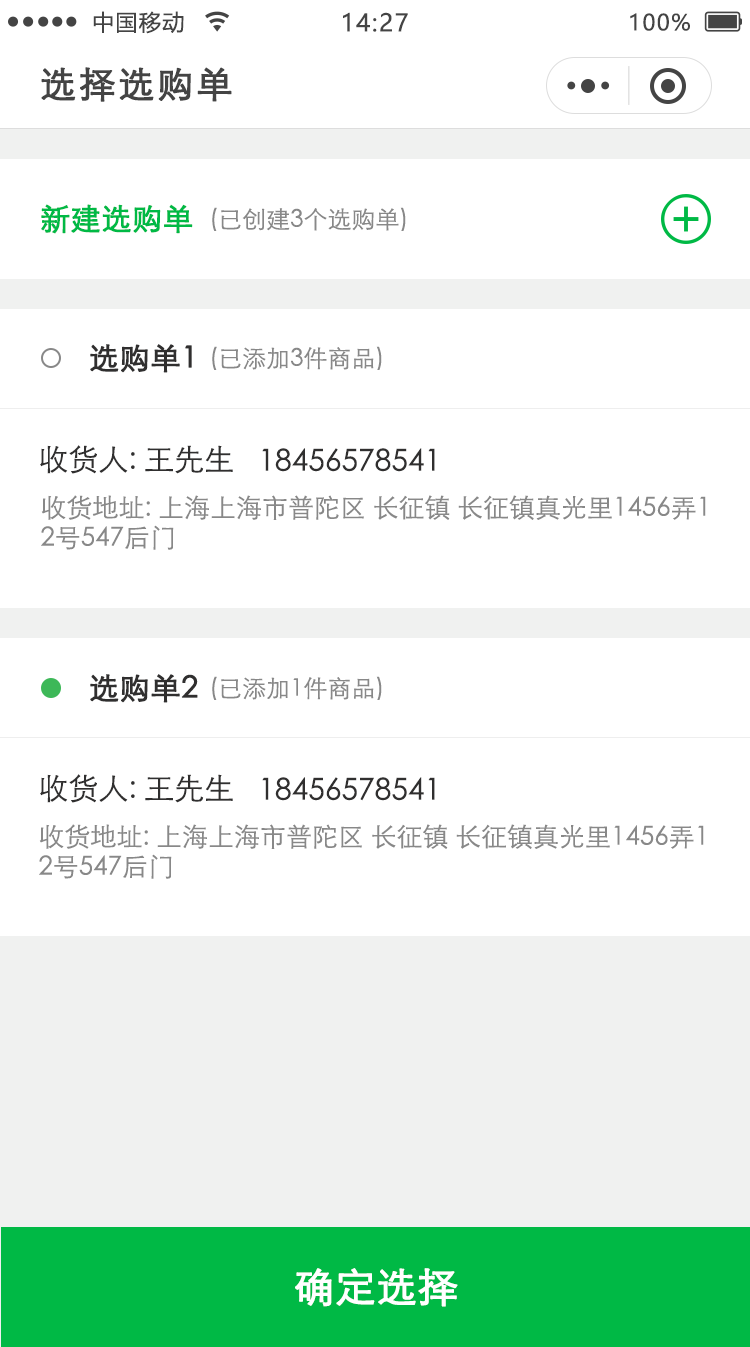
<style>
.page{position:relative;width:750px;height:1347px;background:#ffffff}
.page>*{position:absolute;margin:0}
.t1{font:22px "MicrosoftYaHei";letter-spacing:0.06em;color:#444444}
.t2{font:24px "MicrosoftYaHei";letter-spacing:0.06em;color:#444444}
.t3{font:36px "STXihei";letter-spacing:0.06em;color:#444444;font-weight:bold}
.t4{font:30px "STXihei";color:#00b945;font-weight:bold}
.t5{font:24px "STXihei";color:#888888}
.t6{font:30px "STXihei";color:#302f2f;font-weight:bold}
.t7{font:30px "STXihei";color:#302f2f}
.t8{font:26px/30px "STXihei";color:#888888}
.t9{font:40px "STXihei";color:#ffffff;font-weight:bold}
</style>
<div class="page">
<p class="t1" style="left:93px;top:11px;width:91px;height:23px">中国移动</p>
<p class="t2" style="left:343px;top:12px;width:65px;height:20px">14:27</p>
<p class="t1" style="left:630px;top:13px;width:60px;height:18px">100%</p>
<p class="t3" style="left:41px;top:67px;width:191px;height:35px">选择选购单</p>
<p class="t4" style="left:41px;top:204px;width:152px;height:30px">新建选购单</p>
<p class="t5" style="left:212px;top:207px;width:194px;height:24px">(已创建3个选购单)</p>
<p class="t6" style="left:90px;top:344px;width:102px;height:29px">选购单1</p>
<p class="t5" style="left:212px;top:346px;width:170px;height:24px">(已添加3件商品)</p>
<p class="t7" style="left:40px;top:445px;width:193px;height:29px">收货人: 王先生</p>
<p class="t7" style="left:262px;top:448px;width:173px;height:24px">18456578541</p>
<p class="t8" style="left:41px;top:495px;width:665px;height:55px">收货地址: 上海上海市普陀区 长征镇 长征镇真光里1456弄1<br>2号547后门</p>
<p class="t6" style="left:90px;top:674px;width:108px;height:29px">选购单2</p>
<p class="t5" style="left:212px;top:676px;width:170px;height:24px">(已添加1件商品)</p>
<p class="t7" style="left:40px;top:774px;width:193px;height:29px">收货人: 王先生</p>
<p class="t7" style="left:262px;top:777px;width:173px;height:24px">18456578541</p>
<p class="t8" style="left:39px;top:824px;width:665px;height:55px">收货地址: 上海上海市普陀区 长征镇 长征镇真光里1456弄1<br>2号547后门</p>
<p class="t9" style="left:295px;top:1268px;width:163px;height:39px">确定选择</p>
</div>
